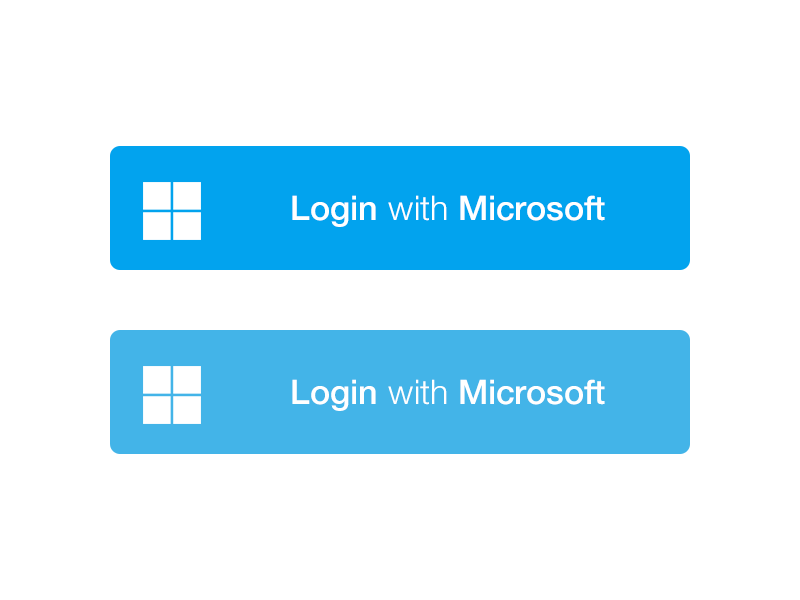
<style>
.page{position:relative;width:800px;height:600px;background:#ffffff}
.page>*{position:absolute;margin:0}
.t1{font:34px "HelveticaNeue-Medium";color:#ffffff}
.t2{font:34px "HelveticaNeue-Light";color:#ffffff}
</style>
<div class="page">
<p class="t1" style="left:292px;top:195px;width:313px;height:32px">Login <span class="t2">with</span> Microsoft</p>
<p class="t1" style="left:292px;top:379px;width:313px;height:32px">Login <span class="t2">with</span> Microsoft</p>
</div>
